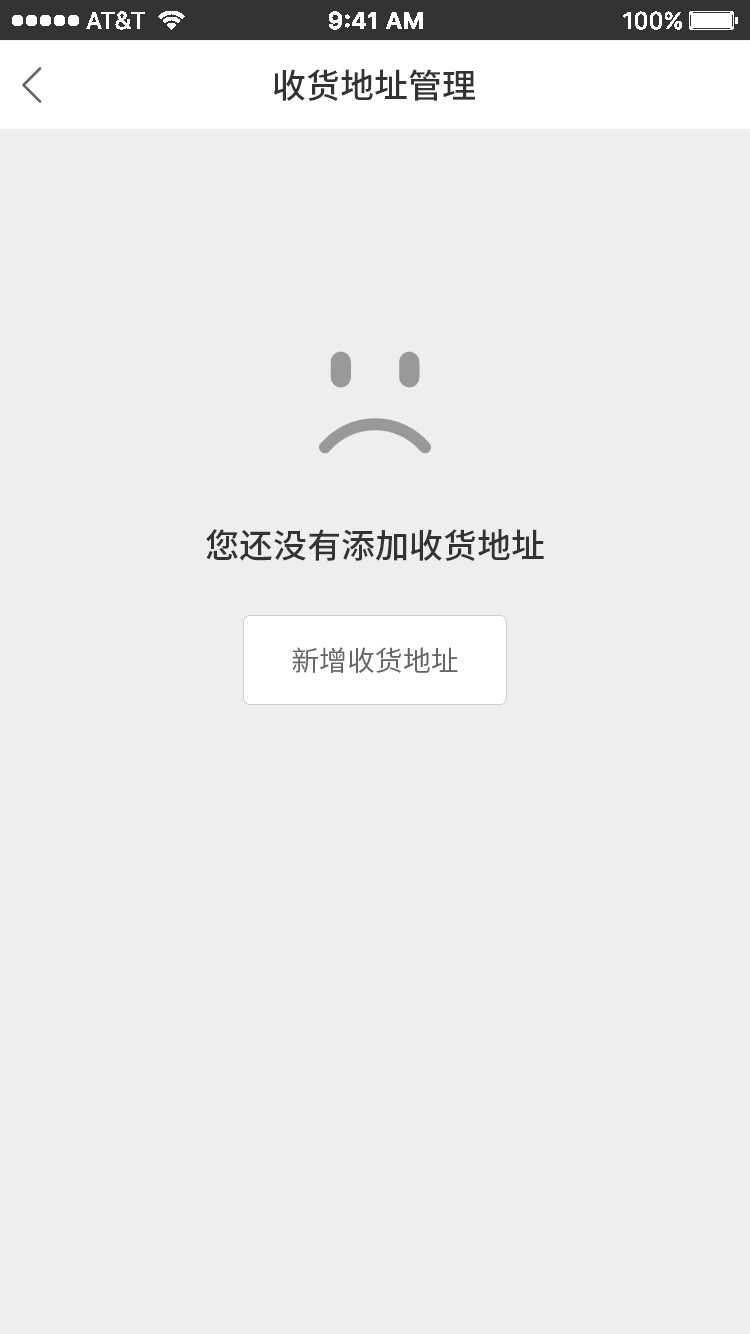
<style>
.page{position:relative;width:750px;height:1334px;background:#eeeeee}
.page>*{position:absolute;margin:0}
.t1{font:34px "SourceHanSansCN-Medium";color:#333333}
.t2{font:28px "SourceHanSansCN-Regular";color:#666666}
</style>
<div class="page">
<p class="t1" style="left:273px;top:69px;width:202px;height:32px">收货地址管理</p>
<p class="t1" style="left:206px;top:529px;width:338px;height:32px">您还没有添加收货地址</p>
<p class="t2" style="left:292px;top:647px;width:166px;height:26px">新增收货地址</p>
</div>
